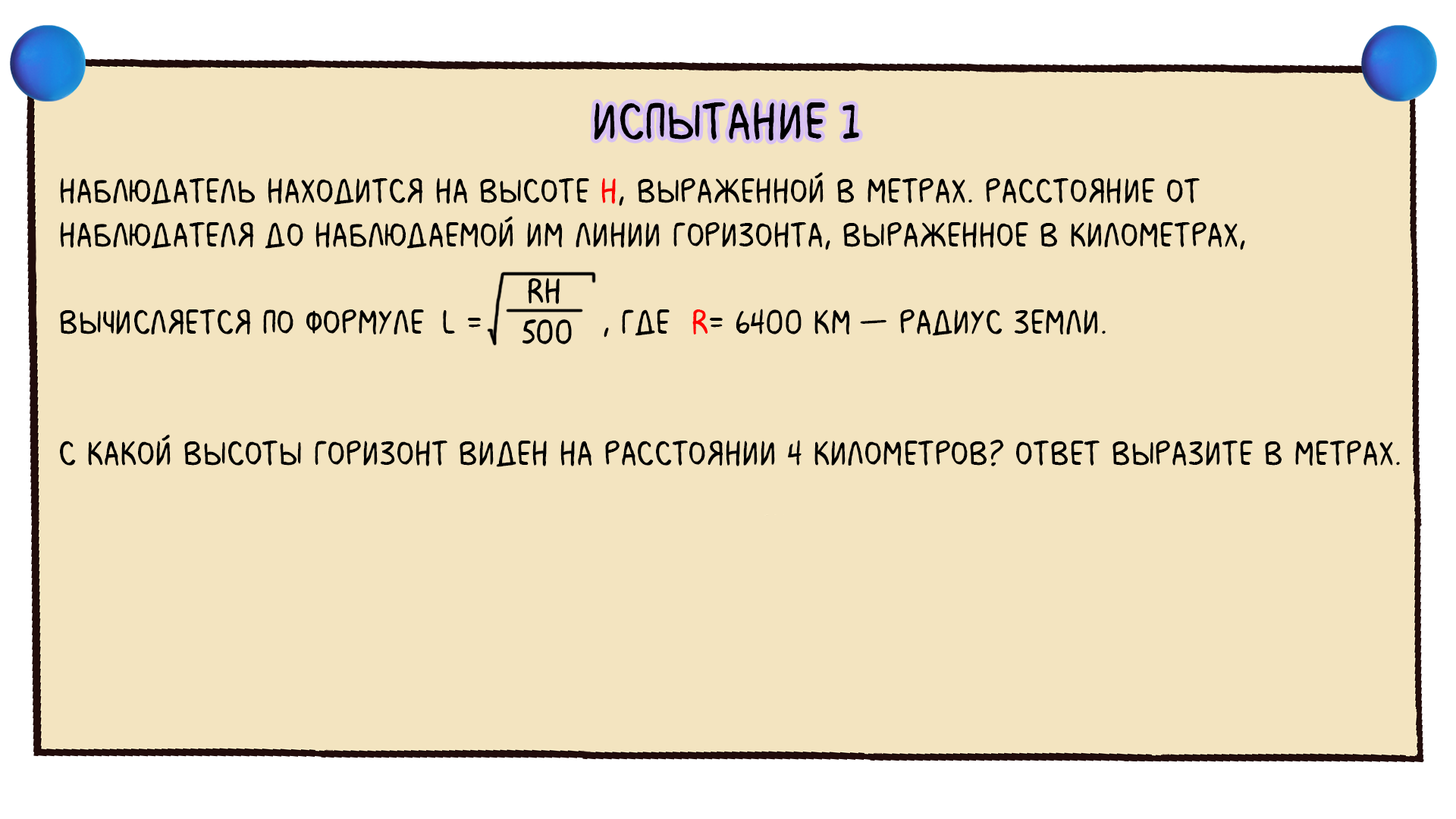
<style>
.page{position:relative;width:1456px;height:819px;background:#f3e4c0}
.page>*{position:absolute;margin:0}
.t1{font:54.6px "MilkMustacheBB";color:#000000}
.t2{font:36.4px "MilkMustacheBB";color:#000000}
.t3{font:36.4px "MilkMustacheBB";color:#fc0000}
.t4{font:36.4px "MilkMustacheBB";color:#ff0000}
</style>
<div class="page">
<p class="t1" style="left:594px;top:102px;width:265px;height:39px">испытание 1</p>
<p class="t2" style="left:60px;top:172px;width:1340px;height:295px">Наблюдатель находится на высоте <span class="t3">H</span>, выраженной в метрах. Расстояние от <br>наблюдателя до наблюдаемой им линии горизонта, выраженное в километрах, <br><br>вычисляется по формуле                 , где  <span class="t4">R</span>= 6400 км — радиус Земли. <br><br><br>С какой высоты горизонт виден на расстоянии 4 километров? Ответ выразите в метрах.</p>
</div>
